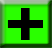
<style>
.page{position:relative;width:52px;height:48px;background:#2aff00}
.page>*{position:absolute;margin:0}
.t1{font:65.6px "Arial-BoldMT";color:#000000;scale:1.07 1}
</style>
<div class="page">
<p class="t1" style="left:7px;top:8px;width:36px;height:32px">+</p>
</div>
